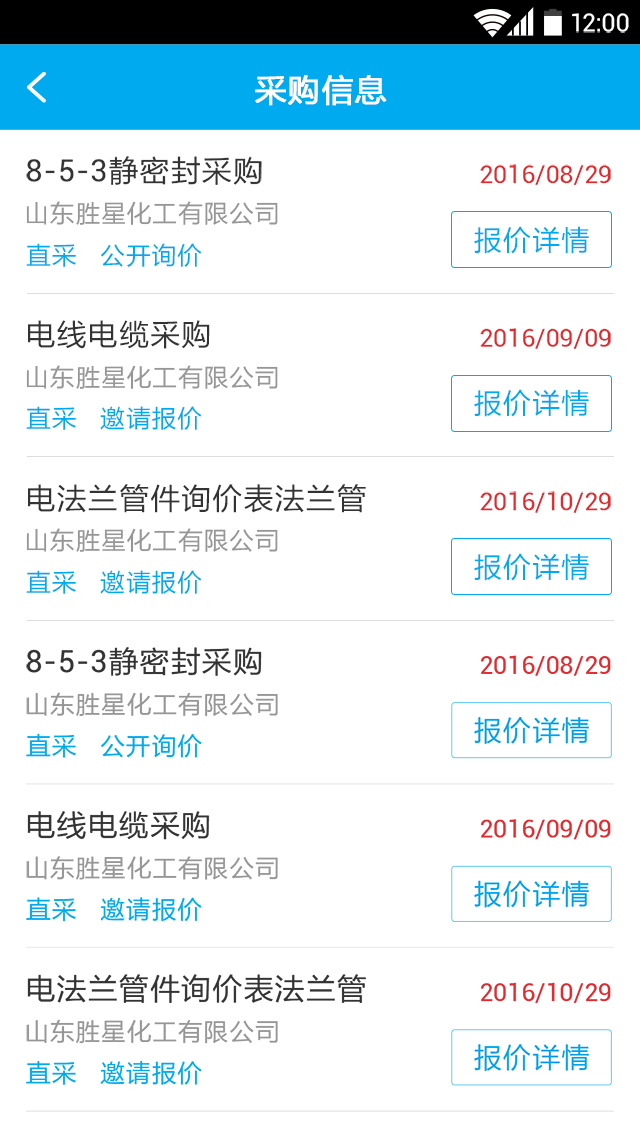
<style>
.page{position:relative;width:640px;height:1138px;background:#ffffff}
.page>*{position:absolute;margin:0}
.t1{font:24.9px "Roboto-Regular";color:#ffffff}
.t2{font:32px "FZLTHJW--GB1-0";letter-spacing:0.02em;color:#ffffff;font-weight:bold}
.t3{font:30.2px "Roboto-Regular";letter-spacing:0.03em;color:#333333}
.t4{font:30.2px "FZLTHJW--GB1-0";letter-spacing:0.03em;color:#333333}
.t5{font:24.9px "Roboto-Regular";color:#e1292e}
.t6{font:24.9px "FZLTHJW--GB1-0";letter-spacing:0.03em;color:#969696}
.t7{font:28.4px "FZLTHJW--GB1-0";letter-spacing:0.03em;color:#00aaee}
.t8{font:24.9px "FZLTHJW--GB1-0";letter-spacing:0.03em;color:#00aaee}
</style>
<div class="page">
<p class="t1" style="left:572px;top:13px;width:57px;height:20px">12:00</p>
<p class="t2" style="left:255px;top:74px;width:132px;height:32px">采购信息</p>
<p class="t3" style="left:26px;top:156px;width:236px;height:29px">8-5-3<span class="t4">静密封采购</span></p>
<p class="t5" style="left:480px;top:164px;width:131px;height:21px">2016/08/29</p>
<p class="t6" style="left:26px;top:201px;width:252px;height:24px">山东胜星化工有限公司</p>
<p class="t7" style="left:474px;top:226px;width:115px;height:28px">报价详情</p>
<p class="t8" style="left:26px;top:243px;width:176px;height:24px">直采   公开询价</p>
<p class="t4" style="left:28px;top:320px;width:182px;height:29px">电线电缆采购</p>
<p class="t5" style="left:480px;top:328px;width:131px;height:21px">2016/09/09</p>
<p class="t6" style="left:26px;top:365px;width:252px;height:24px">山东胜星化工有限公司</p>
<p class="t7" style="left:474px;top:389px;width:115px;height:28px">报价详情</p>
<p class="t8" style="left:26px;top:406px;width:176px;height:24px">直采   邀请报价</p>
<p class="t4" style="left:28px;top:484px;width:338px;height:29px">电法兰管件询价表法兰管</p>
<p class="t5" style="left:480px;top:491px;width:131px;height:22px">2016/10/29</p>
<p class="t6" style="left:26px;top:528px;width:252px;height:24px">山东胜星化工有限公司</p>
<p class="t7" style="left:474px;top:553px;width:115px;height:28px">报价详情</p>
<p class="t8" style="left:26px;top:570px;width:176px;height:24px">直采   邀请报价</p>
</div>
